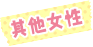
<style>
.page{position:relative;width:93px;height:47px;background:#ffffff}
.page>*{position:absolute;margin:0}
.t1{font:11.5px "shetumodengxiaofangti";color:#ef8299;font-weight:bold;scale:0.94 1}
</style>
<div class="page">
<p class="t1" style="left:11px;top:8px;width:72px;height:30px;rotate:-11deg">其他女性</p>
</div>
